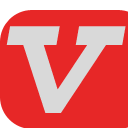
<style>
.page{position:relative;width:128px;height:128px;background:#e72727}
.page>*{position:absolute;margin:0}
.t1{font:200px "Courier-Bold";letter-spacing:-0.025em;color:#d9d9d9;font-style:italic}
</style>
<div class="page">
<p class="t1" style="left:6px;top:26px;width:120px;height:87px">v</p>
</div>
